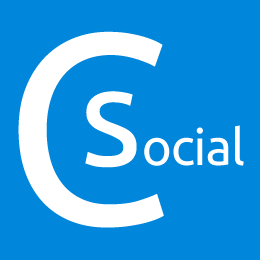
<style>
.page{position:relative;width:260px;height:260px;background:#0086db}
.page>*{position:absolute;margin:0}
.t1{font:270px "Ubuntu";color:#ffffff}
.t2{font:139px "Ubuntu";color:#ffffff}
.t3{font:51px "Ubuntu";letter-spacing:-0.02em;color:#ffffff}
</style>
<div class="page">
<p class="t1" style="left:18px;top:31px;width:146px;height:197px">C</p>
<p class="t2" style="left:85px;top:91px;width:52px;height:77px">s</p>
<p class="t3" style="left:144px;top:125px;width:100px;height:41px">ocial</p>
</div>
